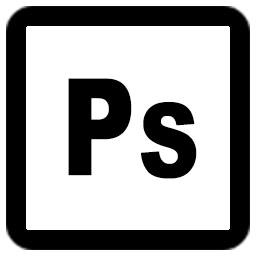
<style>
.page{position:relative;width:256px;height:256px;background:#ffffff}
.page>*{position:absolute;margin:0}
.t1{font:134.7px "Arial-Black";letter-spacing:-0.025em;color:#000000;scale:0.76 1}
.t2{font:103.2px "Arial-Black";letter-spacing:-0.025em;color:#000000;scale:0.82 1}
</style>
<div class="page">
<p class="t1" style="left:68px;top:78px;width:64px;height:98px">P</p>
<p class="t2" style="left:141px;top:102px;width:56px;height:77px">S</p>
</div>
